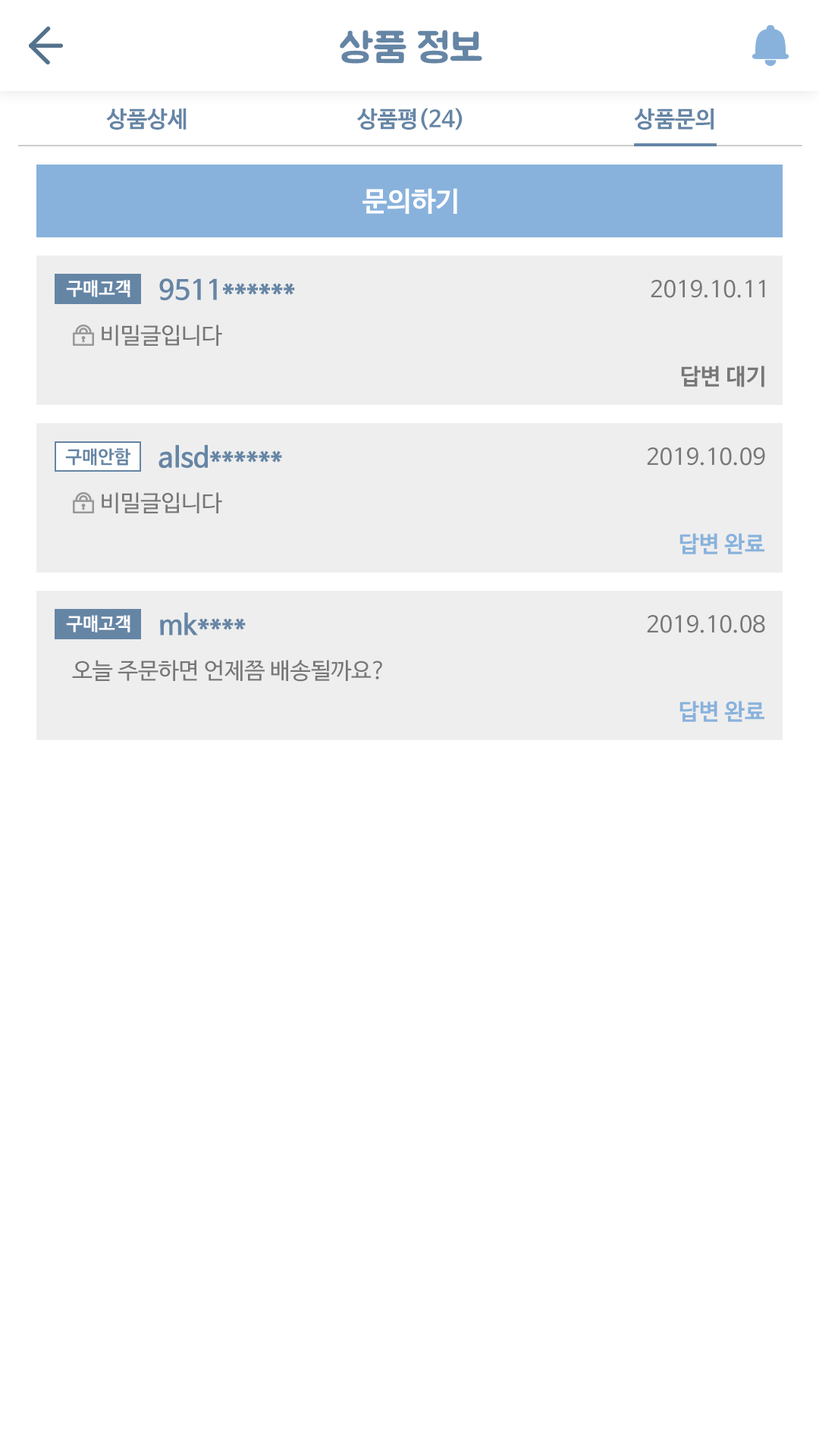
<style>
.page{position:relative;width:819px;height:1456px;background:#ffffff}
.page>*{position:absolute;margin:0}
.t1{font:40.9px "BMJUA";color:#6585a5}
.t2{font:22.7px "NanumBarunGothicBold";color:#6585a5}
.t3{font:27.3px "NanumBarunGothicBold";color:#ffffff}
.t4{font:18.2px "NanumBarunGothicBold";color:#ffffff}
.t5{font:27.3px "NanumBarunGothicBold";color:#6585a5}
.t6{font:22.7px "NanumBarunGothic";color:#777777}
.t7{font:22.7px "NanumBarunGothicBold";color:#777777}
.t8{font:18.2px "NanumBarunGothicBold";color:#6585a5}
.t9{font:22.7px "NanumBarunGothicBold";color:#88b2dc}
</style>
<div class="page">
<p class="t1" style="left:340px;top:30px;width:142px;height:34px">상품 정보</p>
<p class="t2" style="left:106px;top:108px;width:81px;height:22px">상품상세</p>
<p class="t2" style="left:356px;top:108px;width:107px;height:22px">상품평(24)</p>
<p class="t2" style="left:634px;top:108px;width:80px;height:22px">상품문의</p>
<p class="t3" style="left:362px;top:188px;width:95px;height:26px">문의하기</p>
<p class="t4" style="left:66px;top:280px;width:64px;height:17px">구매고객</p>
<p class="t5" style="left:159px;top:278px;width:136px;height:22px">9511******</p>
<p class="t6" style="left:651px;top:280px;width:114px;height:18px">2019.10.11</p>
<p class="t6" style="left:102px;top:325px;width:120px;height:21px">비밀글입니다</p>
<p class="t7" style="left:681px;top:366px;width:83px;height:22px">답변 대기</p>
<p class="t8" style="left:65px;top:448px;width:65px;height:18px">구매안함</p>
<p class="t5" style="left:158px;top:444px;width:124px;height:25px">alsd******</p>
<p class="t6" style="left:647px;top:447px;width:118px;height:19px">2019.10.09</p>
<p class="t6" style="left:102px;top:492px;width:120px;height:21px">비밀글입니다</p>
<p class="t9" style="left:679px;top:533px;width:85px;height:21px">답변 완료</p>
<p class="t4" style="left:66px;top:615px;width:64px;height:17px">구매고객</p>
<p class="t5" style="left:160px;top:612px;width:86px;height:23px">mk****</p>
<p class="t6" style="left:647px;top:615px;width:118px;height:18px">2019.10.08</p>
<p class="t6" style="left:72px;top:660px;width:310px;height:22px">오늘 주문하면 언제쯤 배송될까요?</p>
<p class="t9" style="left:679px;top:701px;width:85px;height:21px">답변 완료</p>
</div>
